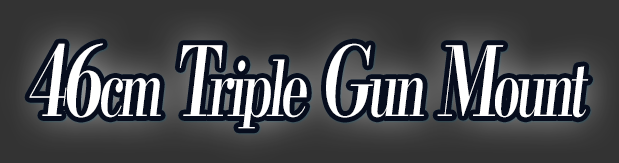
<style>
.page{position:relative;width:619px;height:163px}
.page>*{position:absolute;margin:0}
.t1{font:76.8px "KochoStd-Heavy";letter-spacing:-0.08em;color:#ffffff;font-style:italic;scale:0.66 1}
.t2{font:96px "KochoStd-Heavy";letter-spacing:-0.08em;color:#ffffff;font-style:italic;scale:0.66 1}
</style>
<div class="page">
<p class="t1" style="left:29px;top:43px;width:560px;height:86px"><span class="t2">46</span>cm<span class="t2"> T</span>riple<span class="t2"> G</span>un<span class="t2"> M</span>ount</p>
</div>
